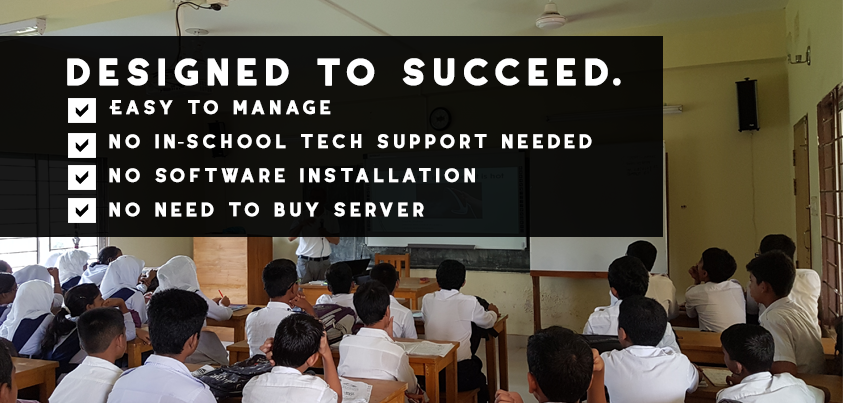
<style>
.page{position:relative;width:843px;height:403px}
.page>*{position:absolute;margin:0}
.t1{font:36.9px "Coyote-SemiBoldDEMO";color:#ffffff;font-weight:bold}
.t2{font:19.7px/17px "Coyote-SemiBoldDEMO";color:#ffffff;font-weight:bold}
.t3{font:19.7px/17px "MyriadPro-Regular";color:#ffffff;font-weight:bold}
</style>
<div class="page">
<p class="t1" style="left:67px;top:58px;width:554px;height:28px">Designed to succeed.</p>
<p class="t2" style="left:109px;top:100px;width:483px;height:117px">Easy to manage<br><br>No in<span class="t3">-</span>school tech support needed<br><br>No software installation<br><br>No need to buy server</p>
</div>
